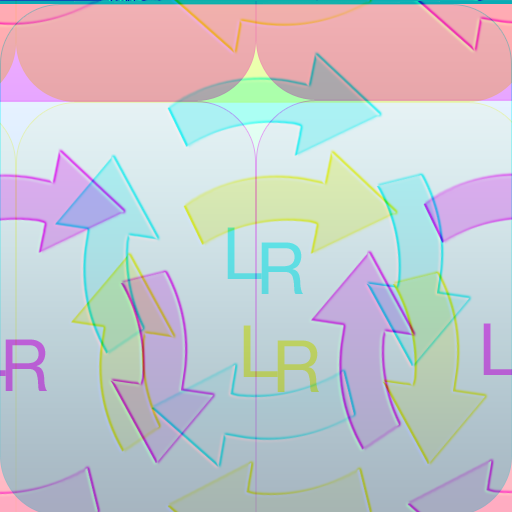
<style>
.page{position:relative;width:512px;height:512px}
.page>*{position:absolute;margin:0}
.t1{font:72px "HelveticaNeue"}
</style>
<div class="page">
<p class="t1" style="left:227px;top:223px;width:35px;height:52px">L</p>
<p class="t1" style="left:261px;top:238px;width:42px;height:52px">R</p>
</div>
